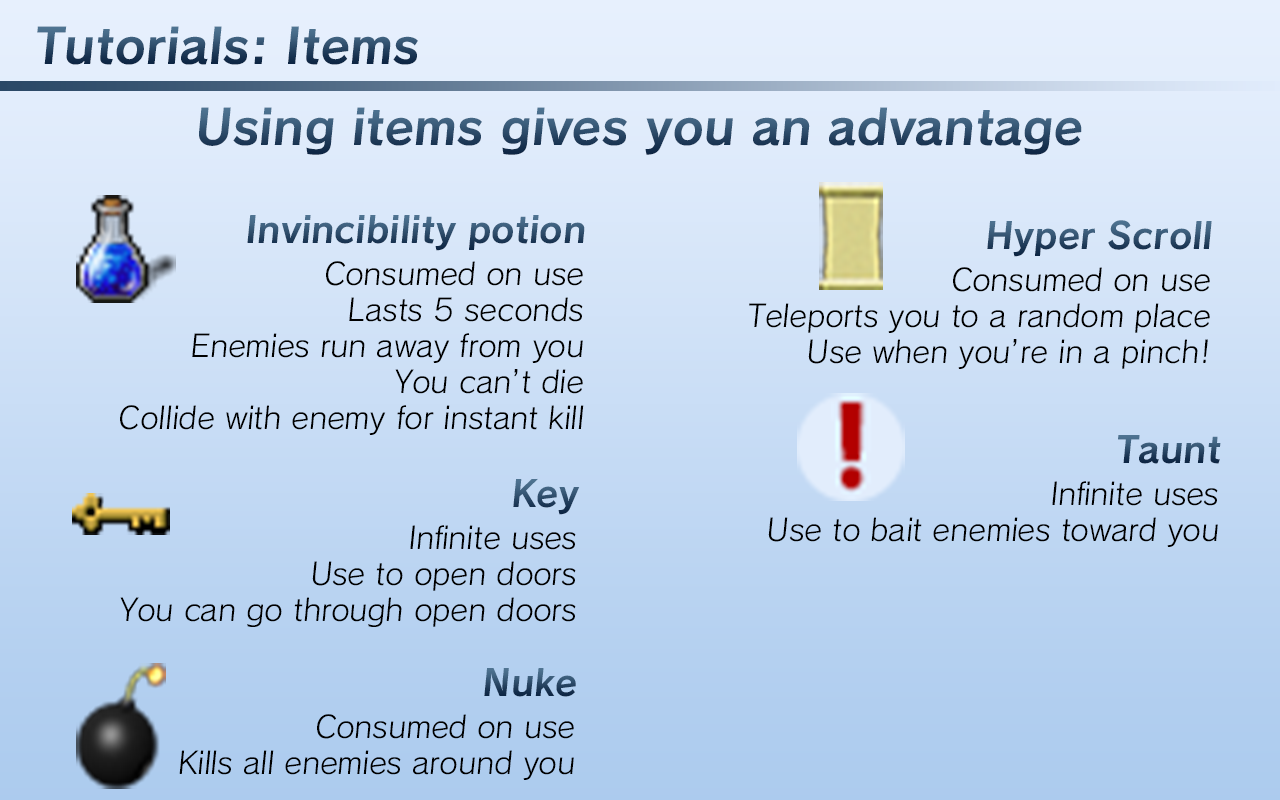
<style>
.page{position:relative;width:1280px;height:800px}
.page>*{position:absolute;margin:0}
.t1{font:48px "Calamity-Bold"}
.t2{font:36px "Calamity-Bold"}
.t3{font:30px "Calamity-Regular";color:#000000}
</style>
<div class="page">
<p class="t1" style="left:37px;top:26px;width:381px;height:39px">Tutorials: Items</p>
<p class="t1" style="left:199px;top:107px;width:883px;height:48px">Using items gives you an advantage</p>
<p class="t2" style="left:247px;top:215px;width:338px;height:36px">Invincibility potion</p>
<p class="t2" style="left:987px;top:220px;width:225px;height:37px">Hyper Scroll</p>
<p class="t3" style="left:120px;top:261px;width:464px;height:174px;text-align:right">Consumed on use<br>Lasts 5 seconds<br>Enemies run away from you<br>You can’t die<br>Collide with enemy for instant kill</p>
<p class="t3" style="left:749px;top:267px;width:461px;height:102px;text-align:right">Consumed on use<br>Teleports you to a random place<br>Use when you’re in a pinch!</p>
<p class="t2" style="left:1118px;top:435px;width:103px;height:29px">Taunt</p>
<p class="t2" style="left:513px;top:478px;width:67px;height:37px">Key</p>
<p class="t3" style="left:768px;top:481px;width:450px;height:66px;text-align:right">Infinite uses<br>Use to bait enemies toward you</p>
<p class="t3" style="left:120px;top:525px;width:456px;height:102px;text-align:right">Infinite uses<br>Use to open doors<br>You can go through open doors</p>
<p class="t2" style="left:484px;top:668px;width:92px;height:29px">Nuke</p>
<p class="t3" style="left:179px;top:714px;width:395px;height:66px;text-align:right">Consumed on use<br>Kills all enemies around you</p>
</div>
